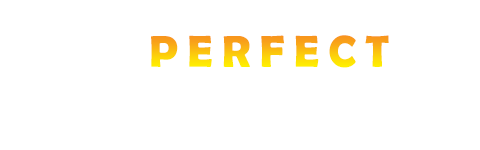
<style>
.page{position:relative;width:480px;height:150px;background:#ffffff}
.page>*{position:absolute;margin:0}
.t1{font:45px "BerlinSansFBDemi-Bold";letter-spacing:0.2em}
</style>
<div class="page">
<p class="t1" style="left:151px;top:35px;width:238px;height:33px">PERFECT</p>
</div>
